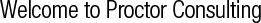
<style>
.page{position:relative;width:261px;height:23px;background:#ffffff}
.page>*{position:absolute;margin:0}
.t1{font:24px "HelveticaNeueLTPro-LtCn";color:#000000}
</style>
<div class="page">
<p class="t1" style="left:0px;top:0px;width:261px;height:23px">Welcome to Proctor Consulting</p>
</div>
